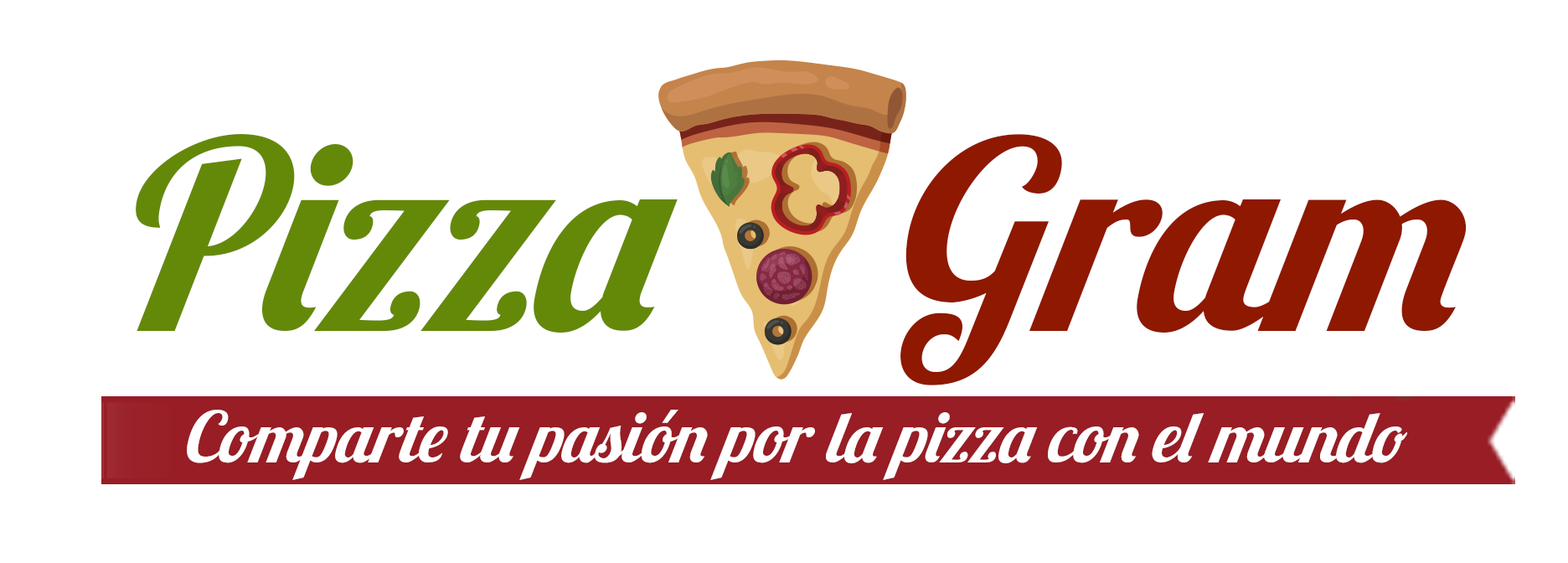
<style>
.page{position:relative;width:1568px;height:563px;background:#ffffff}
.page>*{position:absolute;margin:0}
.t1{font:262.3px "Lobster1.3";color:#648908;font-style:italic}
.t2{font:262.3px "Lobster1.3";color:#8f1800;font-style:italic}
.t3{font:70.5px "Lobster1.3";color:#ffffff;font-style:italic}
</style>
<div class="page">
<p class="t1" style="left:136px;top:134px;width:1331px;height:251px">Pizza    <span class="t2">Gram</span></p>
<p class="t3" style="left:187px;top:410px;width:1221px;height:70px">Comparte tu pasión por la pizza con el mundo</p>
</div>
